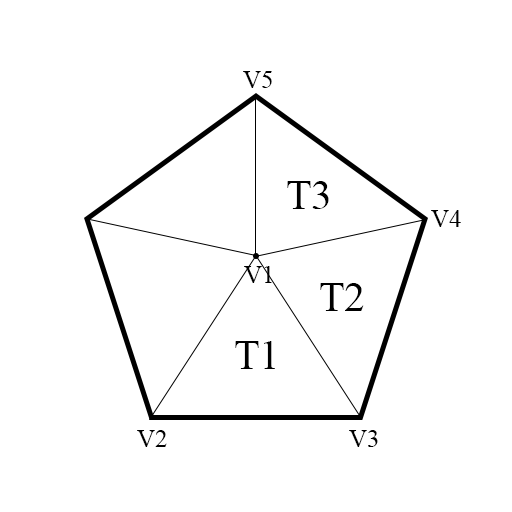
<style>
.page{position:relative;width:512px;height:512px;background:#ffffff}
.page>*{position:absolute;margin:0}
.t1{font:25px "TimesNewRomanPSMT";color:#000000}
.t2{font:41.7px "TimesNewRomanPSMT";color:#000000}
</style>
<div class="page">
<p class="t1" style="left:243px;top:71px;width:29px;height:17px">V5</p>
<p class="t2" style="left:287px;top:181px;width:42px;height:28px">T3</p>
<p class="t1" style="left:431px;top:210px;width:30px;height:17px">V4</p>
<p class="t1" style="left:244px;top:266px;width:28px;height:17px">V1</p>
<p class="t2" style="left:320px;top:283px;width:44px;height:28px">T2</p>
<p class="t2" style="left:235px;top:341px;width:40px;height:28px">T1</p>
<p class="t1" style="left:137px;top:430px;width:30px;height:17px">V2</p>
<p class="t1" style="left:349px;top:430px;width:29px;height:17px">V3</p>
</div>
